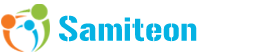
<style>
.page{position:relative;width:259px;height:55px;background:#ffffff}
.page>*{position:absolute;margin:0}
.t1{font:34.9px "Gunplay";color:#04b2e3}
</style>
<div class="page">
<p class="t1" style="left:59px;top:15px;width:138px;height:27px">Samiteon</p>
</div>
